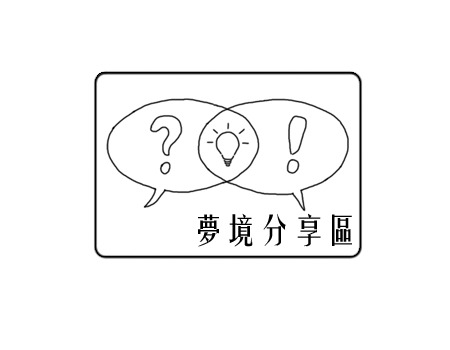
<style>
.page{position:relative;width:450px;height:350px;background:#ffffff}
.page>*{position:absolute;margin:0}
.t1{font:33.3px "FZYTK--GBK1-0";color:#000000}
</style>
<div class="page">
<p class="t1" style="left:198px;top:213px;width:154px;height:34px">夢境分享區</p>
</div>
